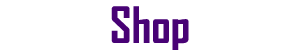
<style>
.page{position:relative;width:300px;height:50px;background:#ffffff}
.page>*{position:absolute;margin:0}
.t1{font:48px "AgencyFB-Bold";color:#480275}
</style>
<div class="page">
<p class="t1" style="left:111px;top:6px;width:78px;height:46px">Shop</p>
</div>
